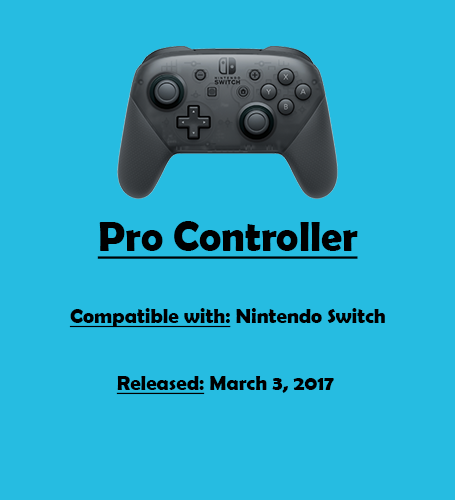
<style>
.page{position:relative;width:455px;height:500px;background:#26bce1}
.page>*{position:absolute;margin:0}
.t1{font:41.7px "BerlinSansFBDemi-Bold";color:#000000;text-decoration:underline}
.t2{font:20.8px "BerlinSansFBDemi-Bold";color:#000000;text-decoration:underline}
.t3{font:20.8px "BerlinSansFBDemi-Bold";color:#000000}
</style>
<div class="page">
<p class="t1" style="left:97px;top:221px;width:261px;height:38px">Pro Controller</p>
<p class="t2" style="left:69px;top:308px;width:316px;height:20px">Compatible with:<span class="t3"> Nintendo Switch</span></p>
<p class="t3" style="left:116px;top:376px;width:218px;height:19px"><span class="t2">Released:</span> March 3, 2017</p>
</div>
